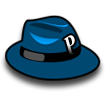
<style>
.page{position:relative;width:105px;height:106px;background:#ffffff}
.page>*{position:absolute;margin:0}
.t1{font:33px "Vijaya-Bold";scale:0.77 1}
</style>
<div class="page">
<p class="t1" style="left:63px;top:35px;width:12px;height:22px;rotate:-33deg">P</p>
</div>
